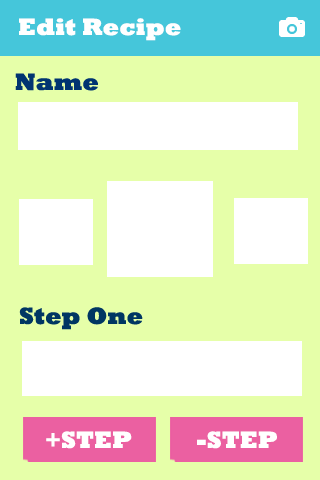
<style>
.page{position:relative;width:320px;height:480px;background:#e6ffa9}
.page>*{position:absolute;margin:0}
.t1{font:24px "Rockwell-ExtraBold";color:#ffffff}
</style>
<div class="page">
<p class="t1" style="left:19px;top:18px;width:162px;height:23px">Edit Recipe</p>
<p class="t1" style="left:46px;top:431px;width:86px;height:18px">+STEP</p>
<p class="t1" style="left:197px;top:431px;width:80px;height:18px">-STEP</p>
</div>
